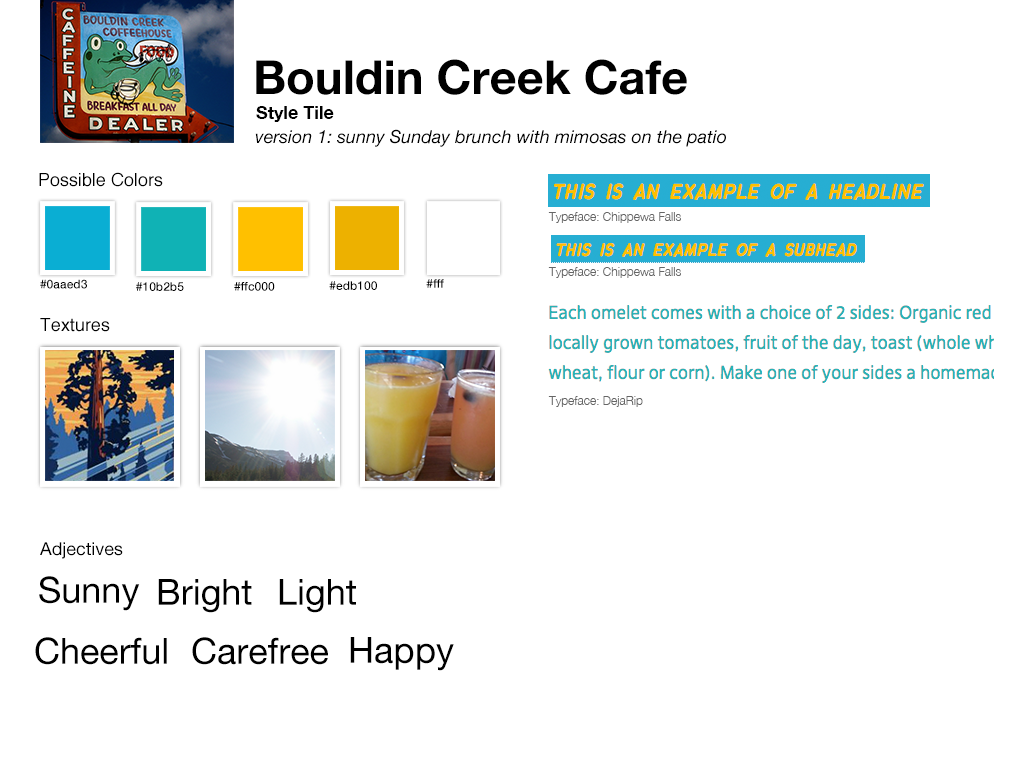
<style>
.page{position:relative;width:1020px;height:760px;background:#ffffff}
.page>*{position:absolute;margin:0}
.t1{font:47px "HelveticaNeue-Bold";color:#000000}
.t2{font:18px "HelveticaNeue-Bold";color:#000000}
.t3{font:18px "HelveticaNeue-Italic";color:#000000}
.t4{font:18px "Helvetica";color:#000000}
.t5{font:12px "HelveticaNeue-Light";color:#666666}
.t6{font:12px "HelveticaNeue-Medium";color:#000000}
.t7{font:18px "HelveticaNeue";color:#000000}
.t8{font:36px "HelveticaNeue";color:#000000}
</style>
<div class="page">
<p class="t1" style="left:256px;top:59px;width:431px;height:36px">Bouldin Creek Cafe</p>
<p class="t2" style="left:256px;top:106px;width:78px;height:16px">Style Tile</p>
<p class="t3" style="left:255px;top:129px;width:471px;height:18px">version 1: sunny Sunday brunch with mimosas on the patio</p>
<p class="t4" style="left:39px;top:172px;width:124px;height:15px">Possible Colors</p>
<p class="t5" style="left:548px;top:212px;width:133px;height:11px">Typeface: Chippewa Falls</p>
<p class="t5" style="left:548px;top:267px;width:133px;height:11px">Typeface: Chippewa Falls</p>
<p class="t6" style="left:40px;top:279px;width:47px;height:10px">#0aaed3</p>
<p class="t6" style="left:329px;top:281px;width:48px;height:9px">#edb100</p>
<p class="t6" style="left:426px;top:279px;width:18px;height:9px">#fff</p>
<p class="t6" style="left:136px;top:282px;width:48px;height:9px">#10b2b5</p>
<p class="t6" style="left:234px;top:282px;width:41px;height:9px">#ffc000</p>
<p class="t4" style="left:40px;top:318px;width:70px;height:14px">Textures</p>
<p class="t5" style="left:548px;top:396px;width:95px;height:11px">Typeface: DejaRip</p>
<p class="t7" style="left:40px;top:542px;width:83px;height:17px">Adjectives</p>
<p class="t8" style="left:39px;top:576px;width:101px;height:35px">Sunny</p>
<p class="t8" style="left:158px;top:579px;width:94px;height:34px">Bright</p>
<p class="t8" style="left:279px;top:579px;width:77px;height:34px">Light</p>
<p class="t8" style="left:35px;top:637px;width:132px;height:28px">Cheerful</p>
<p class="t8" style="left:192px;top:637px;width:136px;height:28px">Carefree</p>
<p class="t8" style="left:350px;top:637px;width:104px;height:34px">Happy</p>
</div>
